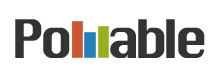
<style>
.page{position:relative;width:216px;height:75px;background:#ffffff}
.page>*{position:absolute;margin:0}
.t1{font:51.8px "Krungthep";letter-spacing:-0.12em;color:#333333}
</style>
<div class="page">
<p class="t1" style="left:15px;top:19px;width:190px;height:39px">Po      able</p>
</div>
